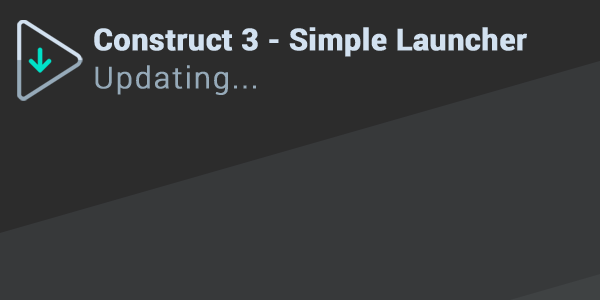
<style>
.page{position:relative;width:600px;height:300px;background:#37393a}
.page>*{position:absolute;margin:0}
.t1{font:30px/38px "Roboto-Bold";color:#d2e1f0;font-weight:bold}
.t2{font:30px/38px "Roboto-Light";letter-spacing:0.05em;color:#96aab9;font-weight:bold}
</style>
<div class="page">
<p class="t1" style="left:94px;top:27px;width:433px;height:68px">Construct 3 - Simple Launcher<br><span class="t2">Updating...</span></p>
</div>
